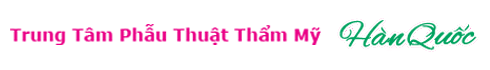
<style>
.page{position:relative;width:490px;height:70px;background:#ffffff}
.page>*{position:absolute;margin:0}
.t1{font:17.3px "Verdana-Bold";color:#ea0085}
</style>
<div class="page">
<p class="t1" style="left:10px;top:24px;width:311px;height:21px">Trung Tâm Phẫu Thuật Thẩm Mỹ</p>
</div>
